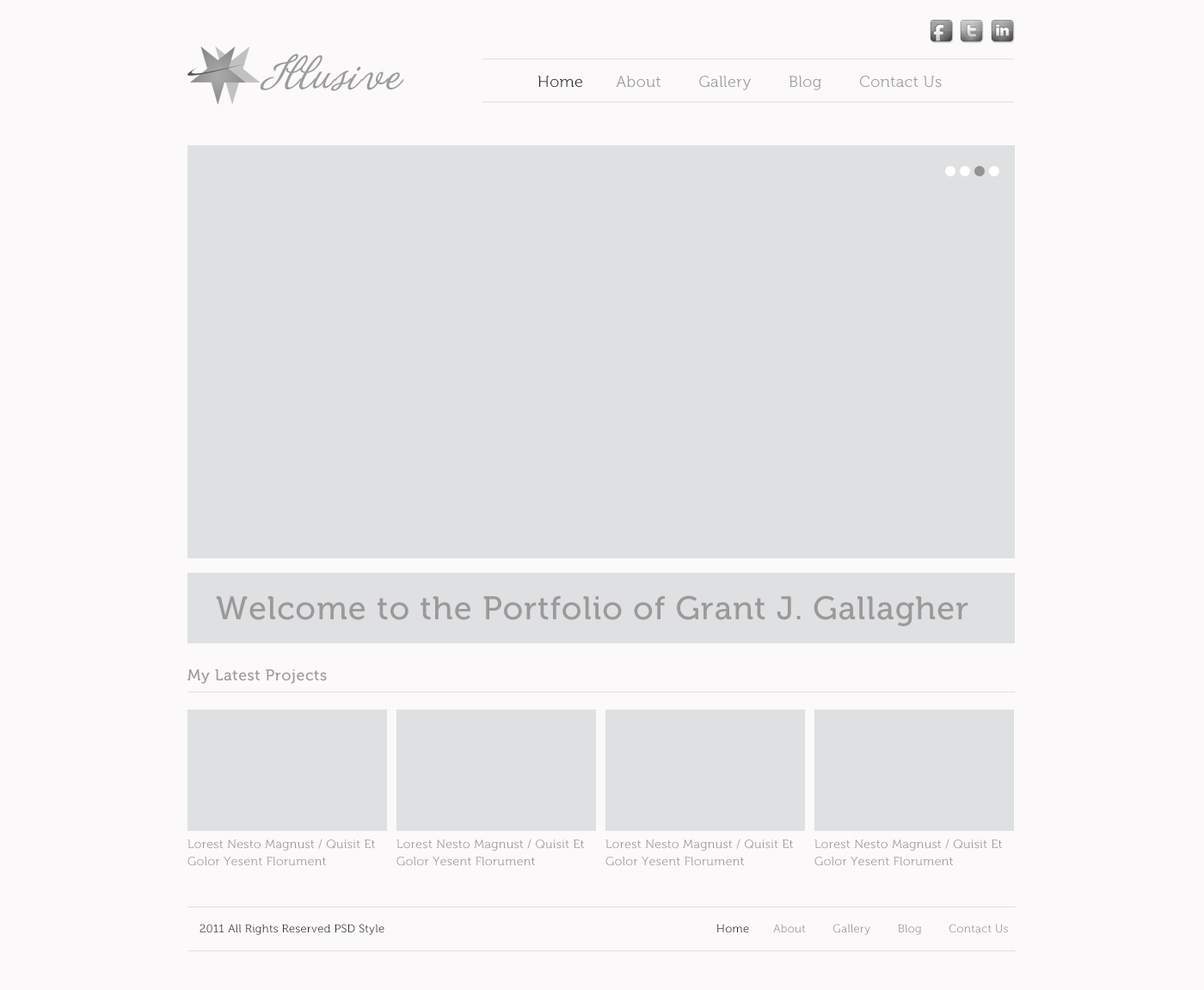
<style>
.page{position:relative;width:1204px;height:990px;background:#fbf9f9}
.page>*{position:absolute;margin:0}
.t1{font:48.2px "LaPorteniadelaBoca";letter-spacing:0.029em;color:#9c9c9c}
.t2{font:15.5px "Museo-300";letter-spacing:0.029em;color:#9c9c9c}
.t3{font:15.5px "Museo-300";letter-spacing:0.029em;color:#2a2929}
.t4{font:32.7px "Museo-500";letter-spacing:0.029em;color:#9b9999}
.t5{font:15.5px "Museo-500";letter-spacing:0.029em;color:#9b9999}
.t6{font:12px/17.2px "Museo-300";letter-spacing:0.029em;color:#9b9999}
.t7{font:11.2px "Museo-300";letter-spacing:0.029em;color:#303136}
.t8{font:11.2px "Museo-300";letter-spacing:0.029em;color:#9c9c9c}
.t9{font:11.2px "Museo-300";letter-spacing:0.029em;color:#2a2929}
</style>
<div class="page">
<p class="t1" style="left:260px;top:53px;width:144px;height:38px">Illusive</p>
<p class="t2" style="left:538px;top:76px;width:404px;height:14px"><span class="t3">Home</span>       About        Gallery        Blog        Contact Us</p>
<p class="t4" style="left:216px;top:595px;width:753px;height:31px">Welcome to the Portfolio of Grant J. Gallagher</p>
<p class="t5" style="left:188px;top:669px;width:139px;height:15px">My Latest Projects</p>
<p class="t6" style="left:188px;top:839px;width:187px;height:27px">Lorest Nesto Magnust / Quisit Et <br>Golor Yesent Florument</p>
<p class="t6" style="left:397px;top:839px;width:187px;height:27px">Lorest Nesto Magnust / Quisit Et <br>Golor Yesent Florument</p>
<p class="t6" style="left:606px;top:839px;width:187px;height:27px">Lorest Nesto Magnust / Quisit Et <br>Golor Yesent Florument</p>
<p class="t6" style="left:815px;top:839px;width:187px;height:27px">Lorest Nesto Magnust / Quisit Et <br>Golor Yesent Florument</p>
<p class="t7" style="left:200px;top:924px;width:185px;height:11px">2011 All Rights Reserved PSD Style</p>
<p class="t8" style="left:717px;top:924px;width:291px;height:11px"><span class="t9">Home</span>       About        Gallery        Blog        Contact Us</p>
</div>
